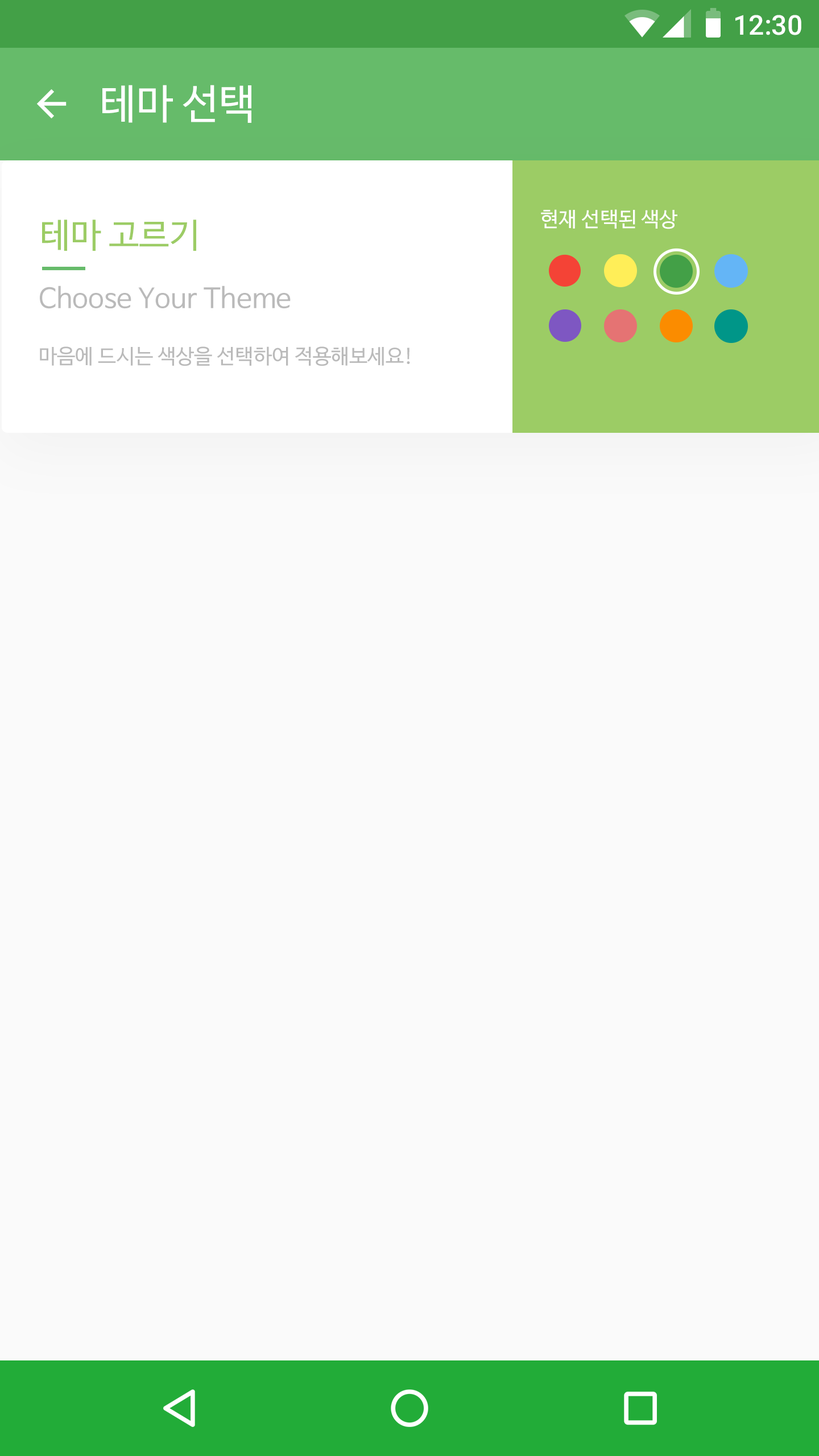
<style>
.page{position:relative;width:819px;height:1456px;background:#fafafa}
.page>*{position:absolute;margin:0}
.t1{font:27.3px "Roboto-Medium";color:#ffffff}
.t2{font:40.9px "NanumBarunGothic";color:#ffffff}
.t3{font:20.5px "NanumBarunGothic";color:#ffffff}
.t4{font:34.1px "NanumBarunGothic";color:#9ccc65}
.t5{font:27.3px "NanumBarunGothic";color:#bababa}
.t6{font:34.1px "NanumBarunGothic";color:#66bb6a}
.t7{font:20.5px "NanumBarunGothic";color:#bababa}
</style>
<div class="page">
<p class="t1" style="left:735px;top:15px;width:66px;height:20px">12:30</p>
<p class="t2" style="left:102px;top:85px;width:149px;height:38px">테마 선택</p>
<p class="t3" style="left:541px;top:209px;width:136px;height:20px">현재 선택된 색상</p>
<p class="t4" style="left:42px;top:220px;width:154px;height:31px">테마 고르기</p>
<p class="t5" style="left:40px;top:286px;width:251px;height:23px"><span class="t6"><br></span>Choose Your Theme</p>
<p class="t7" style="left:40px;top:346px;width:370px;height:20px"><span class="t6"><br></span>마음에 드시는 색상을 선택하여 적용해보세요!</p>
</div>
